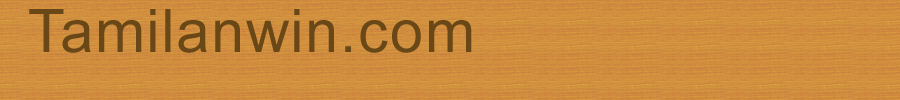
<style>
.page{position:relative;width:900px;height:100px}
.page>*{position:absolute;margin:0}
.t1{font:60px "ArialMT";letter-spacing:0.025em;color:#694717}
</style>
<div class="page">
<p class="t1" style="left:29px;top:9px;width:443px;height:44px">Tamilanwin.com</p>
</div>
